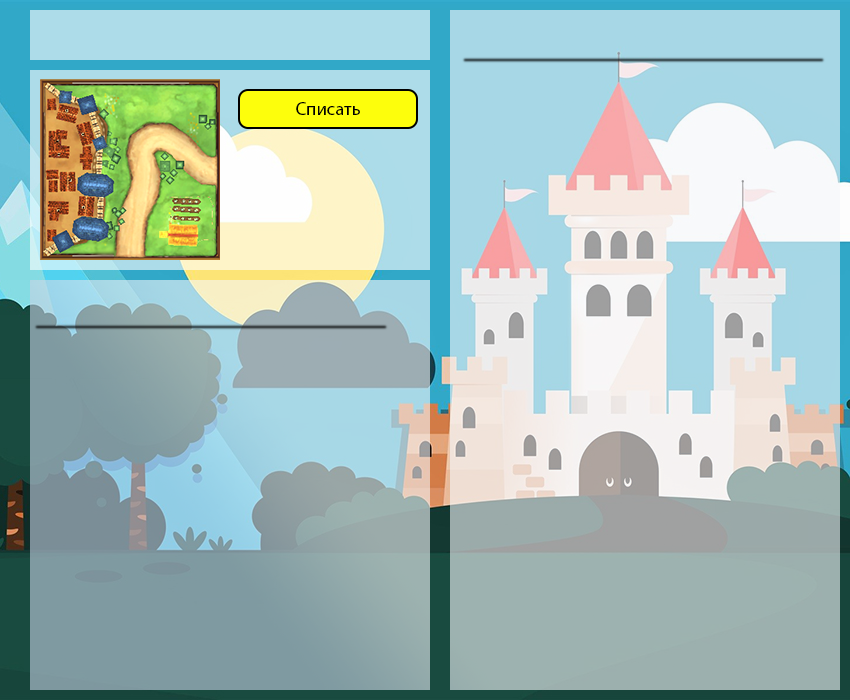
<style>
.page{position:relative;width:850px;height:700px}
.page>*{position:absolute;margin:0}
.t1{font:18.7px "MyriadPro-Regular";color:#000000}
</style>
<div class="page">
<p class="t1" style="left:296px;top:102px;width:64px;height:13px">Списать</p>
</div>
